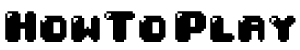
<style>
.page{position:relative;width:300px;height:50px;background:#ffffff}
.page>*{position:absolute;margin:0}
.t1{font:37.2px "04b30";color:#000000}
</style>
<div class="page">
<p class="t1" style="left:5px;top:11px;width:95px;height:31px">How</p>
<p class="t1" style="left:104px;top:11px;width:62px;height:31px">To</p>
<p class="t1" style="left:175px;top:11px;width:121px;height:31px">Play</p>
</div>
